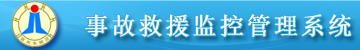
<style>
.page{position:relative;width:360px;height:50px}
.page>*{position:absolute;margin:0}
.t1{font:24px "NSimSun";letter-spacing:0.1em;color:#ffffff;font-weight:bold}
</style>
<div class="page">
<p class="t1" style="left:85px;top:14px;width:266px;height:23px">事故救援监控管理系统</p>
</div>
